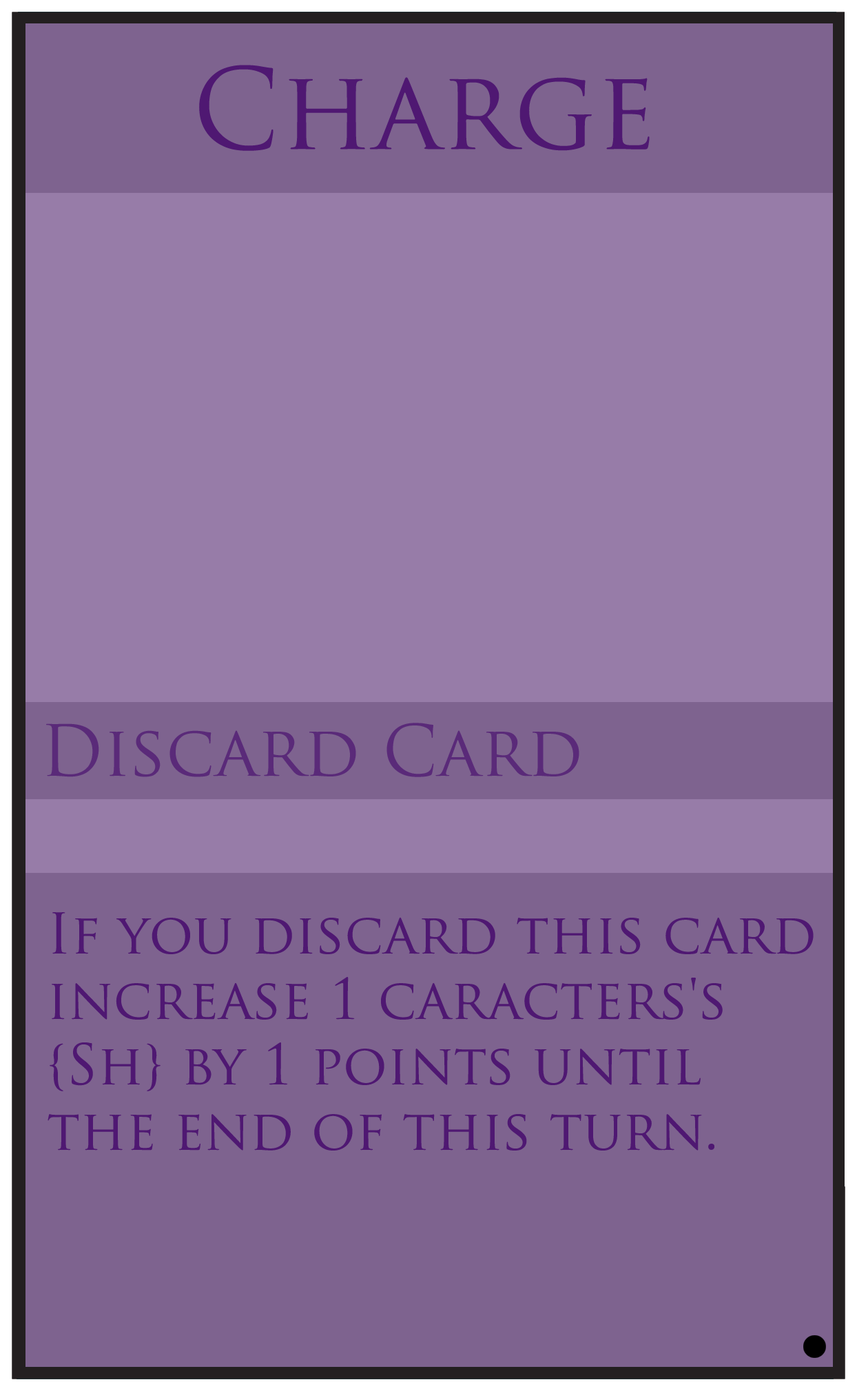
<style>
.page{position:relative;width:857px;height:1391px;background:#7e638f}
.page>*{position:absolute;margin:0}
.t1{font:109.1px "TrajanPro-Regular";color:#4f1872}
.t2{font:68.9px "TrajanPro-Regular";color:#5a2a79}
.t3{font:54.5px "TrajanPro-Regular";color:#4f1872}
</style>
<div class="page">
<p class="t1" style="left:199px;top:65px;width:451px;height:86px">Charge</p>
<p class="t2" style="left:46px;top:723px;width:533px;height:54px">Discard Card</p>
<p class="t3" style="left:48px;top:912px;width:766px;height:239px">If you discard this card <br>increase 1 caracters's <br>{Sh} by 1 points until <br>the end of this turn.</p>
</div>
